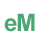
<style>
.page{position:relative;width:40px;height:40px;background:#ffffff}
.page>*{position:absolute;margin:0}
.t1{font:24px "Arial-BoldMT";letter-spacing:-0.05em;color:#4ba575}
</style>
<div class="page">
<p class="t1" style="left:4px;top:13px;width:31px;height:19px">eM</p>
</div>
